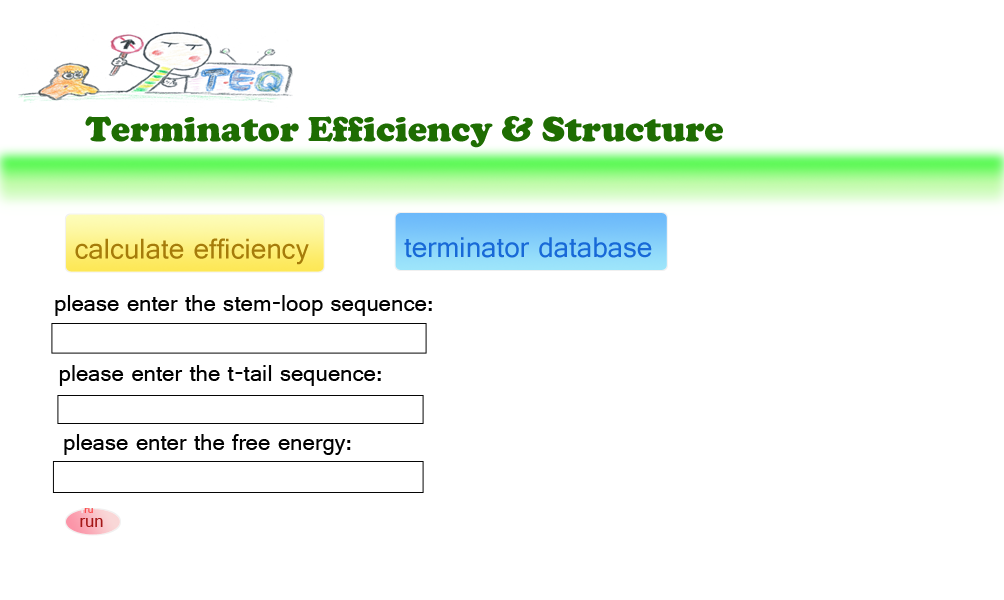
<style>
.page{position:relative;width:1004px;height:600px;background:#ffffff}
.page>*{position:absolute;margin:0}
.t1{font:36px "CooperBlack";color:#1e6d02}
.t2{font:30px "Gautami";color:#a67c0a}
.t3{font:30px "Gautami";color:#1869d7}
.t4{font:24px "Gautami";color:#010101}
.t5{font:11px "Gautami";color:#fb4f4f}
.t6{font:11px "Gautami";color:#f0f0f0}
.t7{font:18px "Gautami";color:#a41616}
</style>
<div class="page">
<p class="t1" style="left:85px;top:116px;width:638px;height:32px">Terminator Efficiency &amp; Structure</p>
<p class="t2" style="left:75px;top:238px;width:234px;height:27px">calculate efficiency</p>
<p class="t3" style="left:404px;top:237px;width:248px;height:21px">terminator database</p>
<p class="t4" style="left:55px;top:295px;width:377px;height:21px">please enter the stem-loop sequence:</p>
<p class="t4" style="left:59px;top:365px;width:322px;height:21px">please enter the t-tail sequence:</p>
<p class="t4" style="left:64px;top:434px;width:287px;height:21px">please enter the free energy:</p>
<p class="t5" style="left:81px;top:508px;width:12px;height:5px"><span class="t6">r</span>run</p>
<p class="t7" style="left:80px;top:518px;width:23px;height:9px">run</p>
</div>
